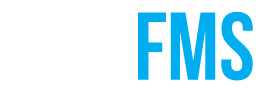
<style>
.page{position:relative;width:258px;height:88px;background:#ffffff}
.page>*{position:absolute;margin:0}
.t1{font:96.2px "BebasNeue";color:#00aeef}
</style>
<div class="page">
<p class="t1" style="left:138px;top:11px;width:115px;height:70px">FMS</p>
</div>
